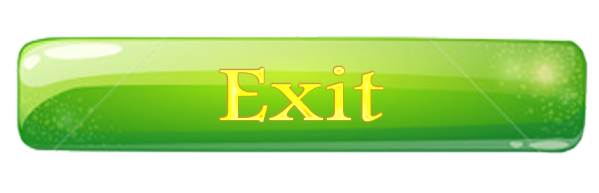
<style>
.page{position:relative;width:599px;height:193px;background:#ffffff}
.page>*{position:absolute;margin:0}
.t1{font:79.6px "K-Sina";scale:1.34 1}
</style>
<div class="page">
<p class="t1" style="left:220px;top:67px;width:164px;height:55px">Exit</p>
</div>
